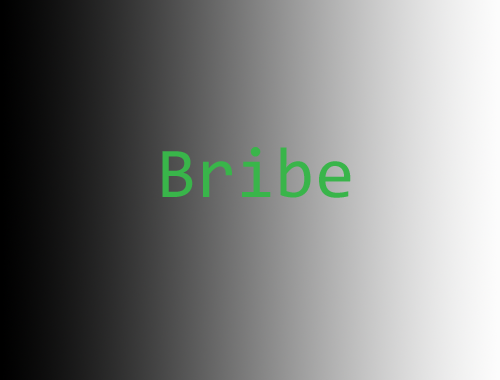
<style>
.page{position:relative;width:500px;height:380px}
.page>*{position:absolute;margin:0}
.t1{font:71.7px "Consolas";color:#39b54a}
</style>
<div class="page">
<p class="t1" style="left:162px;top:147px;width:189px;height:51px">Bribe</p>
</div>
